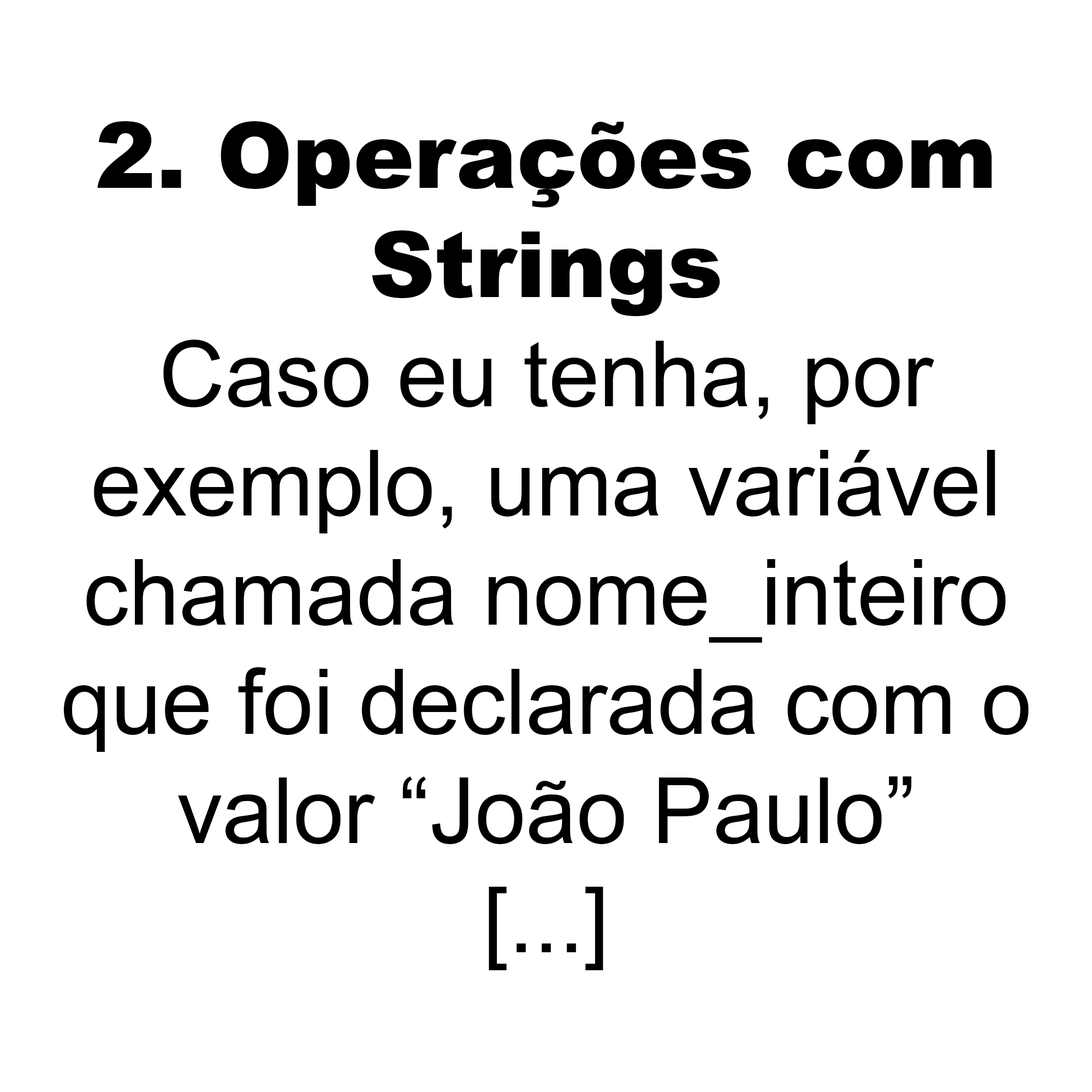
<style>
.page{position:relative;width:1092px;height:1092px;background:#ffffff}
.page>*{position:absolute;margin:0}
.t1{font:91px "ArialMT";color:#000000}
.t2{font:91px "Arial-Black";color:#000000}
</style>
<div class="page">
<p class="t1" style="left:63px;top:121px;width:966px;height:849px;text-align:center"><span class="t2">2. Operações com<br>Strings<br></span>Caso eu tenha, por<br>exemplo, uma variável<br>chamada nome_inteiro<br>que foi declarada com o<br>valor “João Paulo”<br>[...]</p>
</div>
